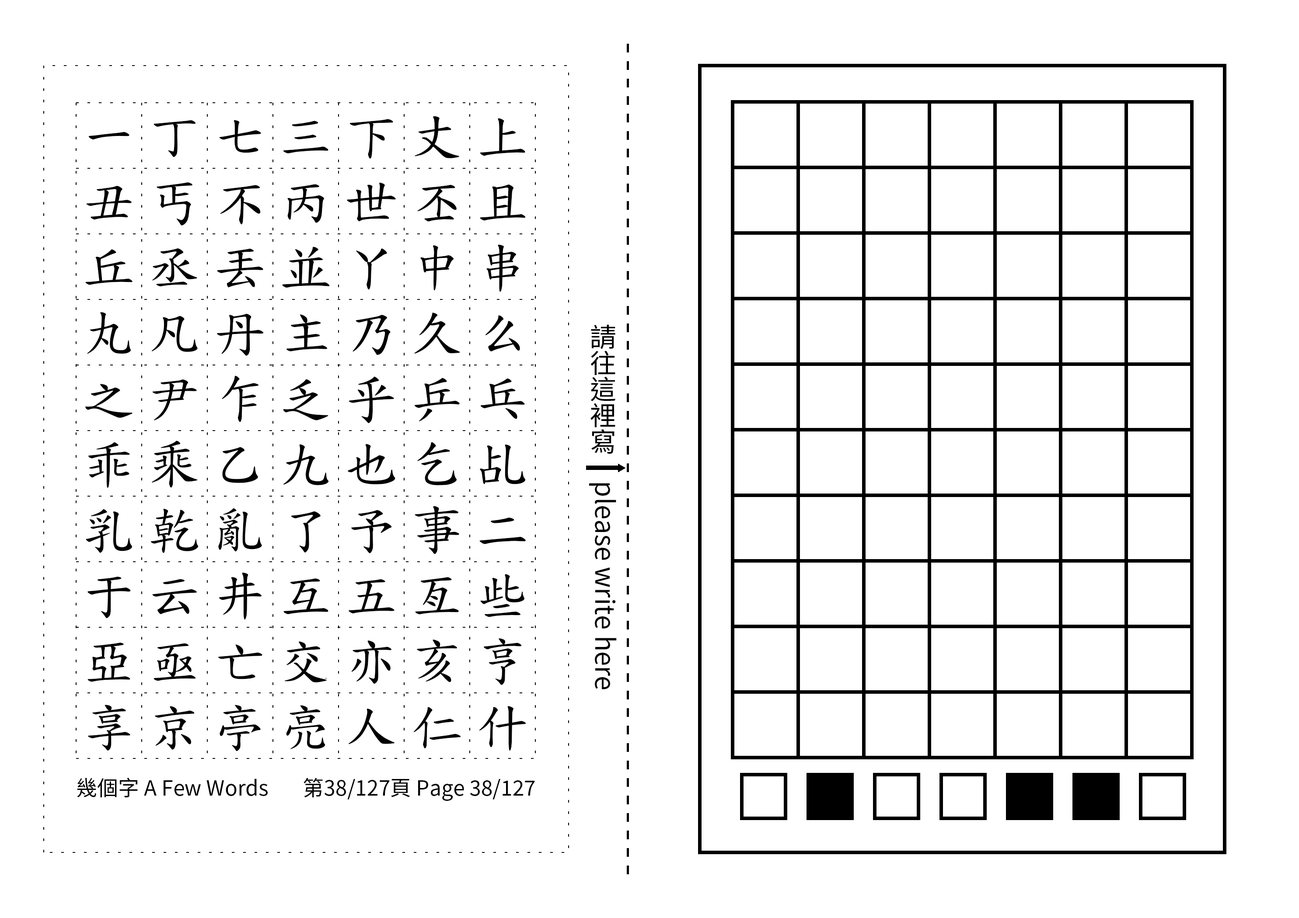
<style>
.page{position:relative;width:1299px;height:918px;background:#ffffff}
.page>*{position:absolute;margin:0}
.t1{font:52.5px/65.6px "TW-Kai-98_1";letter-spacing:0.25em;color:#000000}
.t2{font:26.2px "SourceHanSansTC-Regular";color:#000000}
.t3{font:21px "SourceHanSansTC-Regular";color:#000000}
</style>
<div class="page">
<p class="t1" style="left:85px;top:116px;width:441px;height:636px;text-align:center">一丁七三下丈上丑丐不丙世丕且丘丞丟並丫中串丸凡丹主乃久么之尹乍乏乎乒乓乖乘乙九也乞乩乳乾亂了予事二于云井互五亙些亞亟亡交亦亥亨享京亭亮人仁什</p>
<p class="t2" style="left:589px;top:324px;width:28px;height:366px;text-align:center">請往這裡寫　please write here</p>
<p class="t3" style="left:77px;top:778px;width:191px;height:20px">幾個字 A Few Words</p>
<p class="t3" style="left:303px;top:778px;width:232px;height:23px">第38/127頁 Page 38/127</p>
</div>
